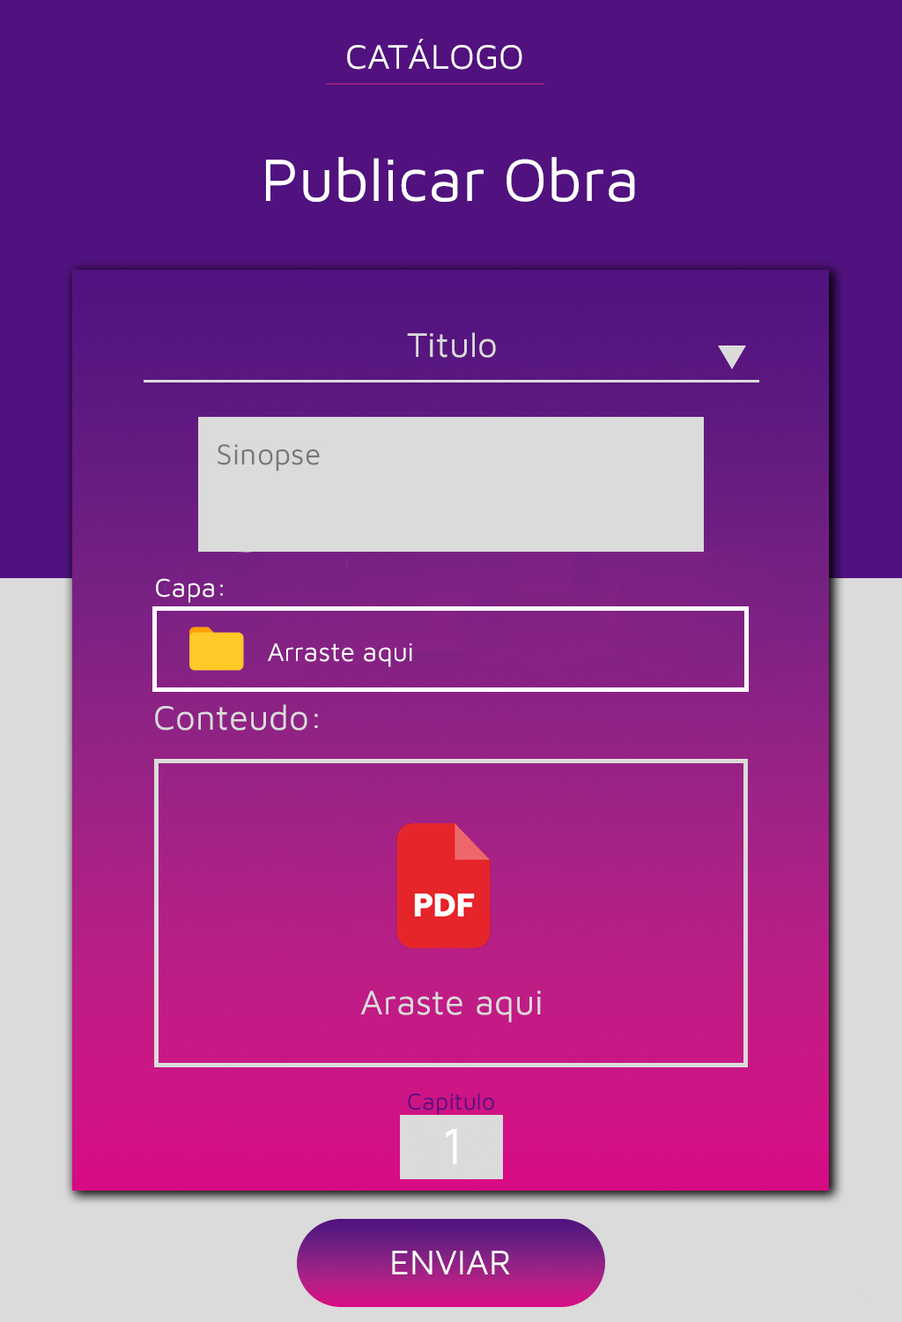
<style>
.page{position:relative;width:902px;height:1322px;background:#51117f}
.page>*{position:absolute;margin:0}
.t1{font:35.2px "MavenPro-Regular";color:#ffffff}
.t2{font:61.7px "MavenPro-Regular";color:#ffffff}
.t3{font:26.4px "MavenPro-Regular";color:#ffffff}
.t4{font:23.7px "MavenPro-Regular";color:#51117f}
.t5{font:52.9px "MavenPro-Regular";color:#ffffff}
</style>
<div class="page">
<p class="t1" style="left:347px;top:39px;width:175px;height:31px">CATÁLOGO</p>
<p class="t2" style="left:266px;top:157px;width:369px;height:45px">Publicar Obra</p>
<p class="t3" style="left:156px;top:578px;width:67px;height:25px">Capa:</p>
<p class="t3" style="left:268px;top:643px;width:144px;height:24px">Arraste aqui</p>
<p class="t4" style="left:408px;top:1093px;width:86px;height:22px">Capitulo</p>
<p class="t5" style="left:446px;top:1129px;width:11px;height:35px">1</p>
<p class="t1" style="left:392px;top:1250px;width:118px;height:24px">ENVIAR</p>
</div>
